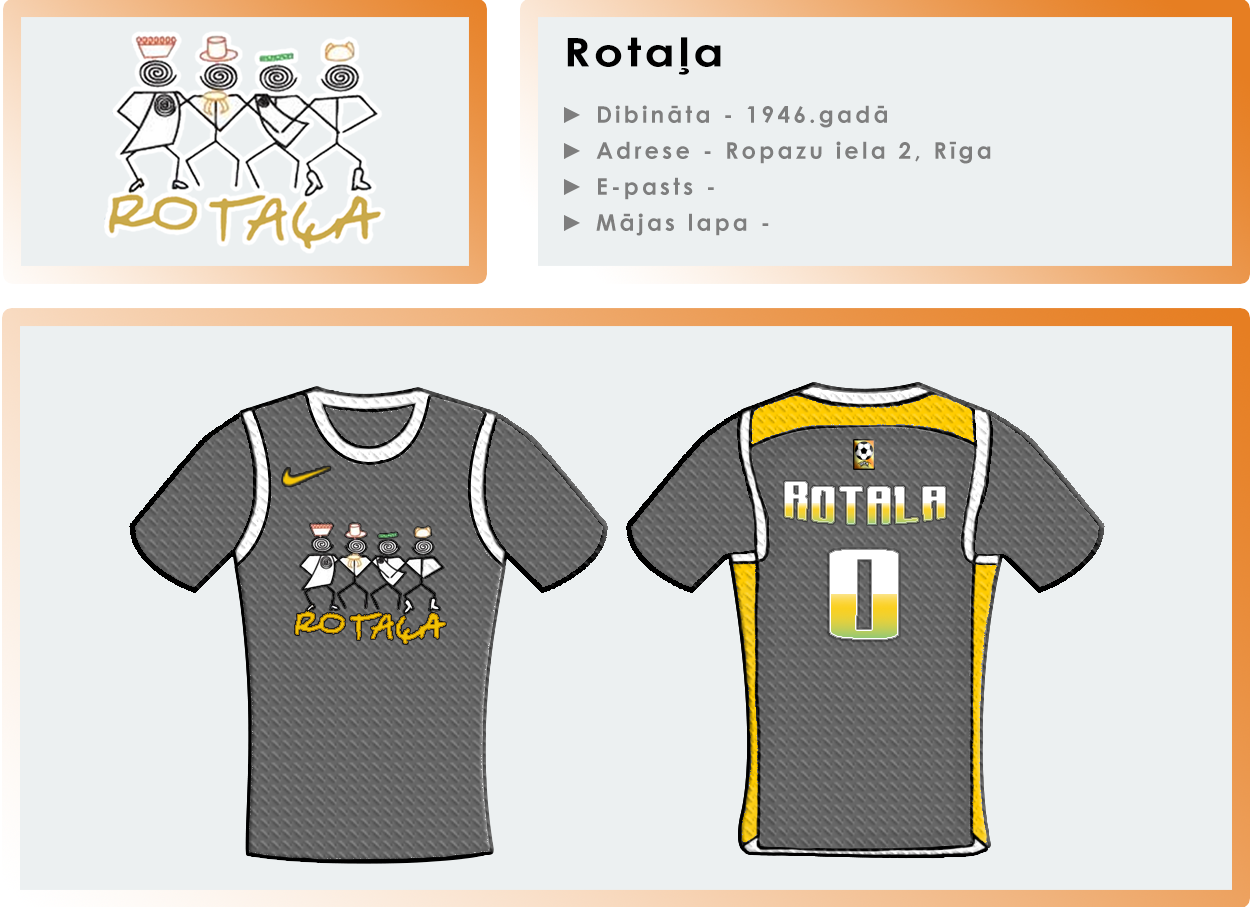
<style>
.page{position:relative;width:1252px;height:907px;background:#ecf0f1}
.page>*{position:absolute;margin:0}
.t1{font:39.7px "CenturyGothic-Bold";letter-spacing:0.08em;color:#000000;scale:1.16 1}
.t2{font:23.1px/36px "CenturyGothic-Bold";letter-spacing:0.14em;color:#7e7e7e}
.t3{font:31.3px "Sportsquake";scale:2.35 1}
.t4{font:77px "Sportsquake";scale:2.86 1}
</style>
<div class="page">
<p class="t1" style="left:567px;top:37px;width:154px;height:38px">Rotaļa</p>
<p class="t2" style="left:564px;top:105px;width:427px;height:131px">► Dibināta - 1946.gadā<br>► Adrese - Ropazu iela 2, Rīga<br>► E-pasts - <br>► Mājas lapa -</p>
<p class="t3" style="left:784px;top:481px;width:162px;height:44px">Rotala</p>
<p class="t4" style="left:829px;top:549px;width:70px;height:91px">0</p>
</div>
